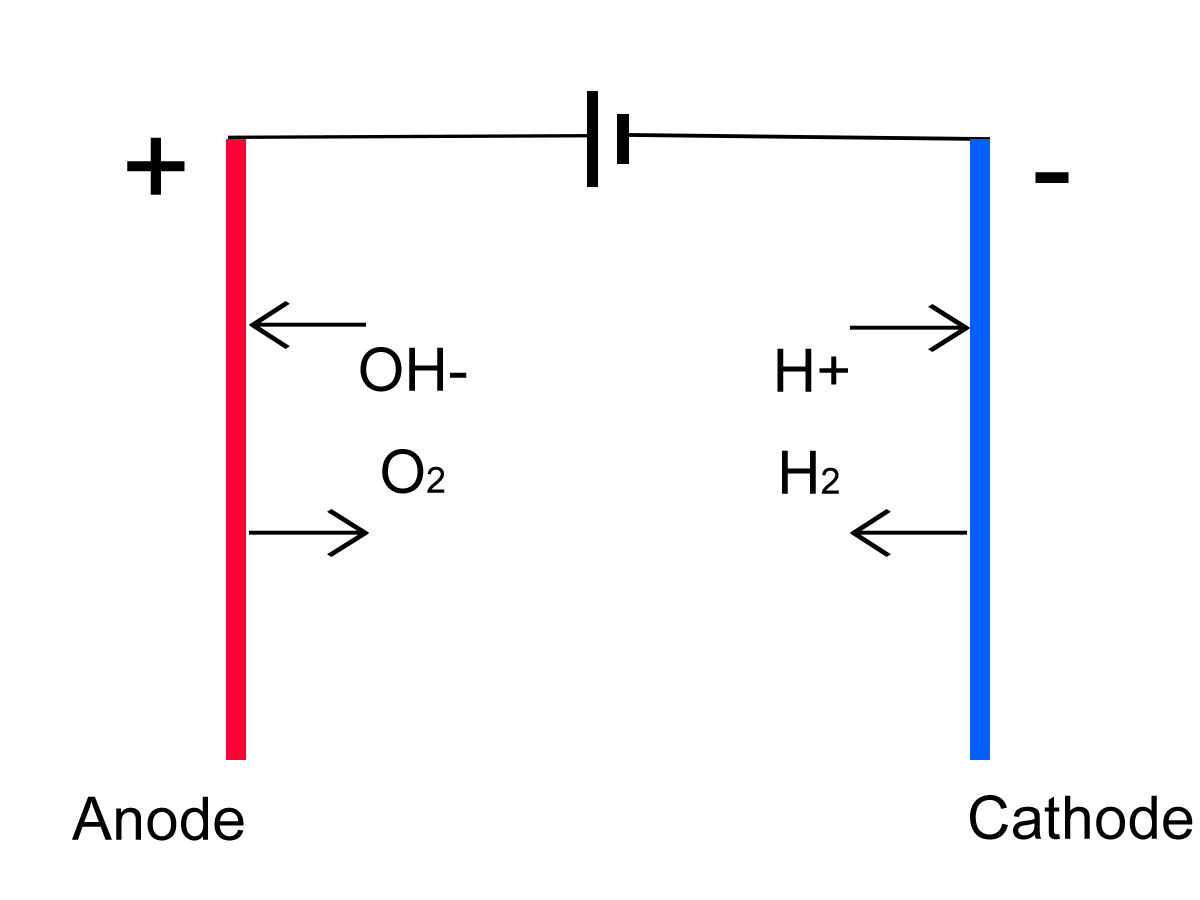
<style>
.page{position:relative;width:1200px;height:900px;background:#ffffff}
.page>*{position:absolute;margin:0}
.t1{font:120px "ArialMT";letter-spacing:0.002em;color:#020000}
.t2{font:60px "ArialMT";letter-spacing:0.002em;color:#020000}
.t3{font:36px "ArialMT";letter-spacing:0.002em;color:#020000}
</style>
<div class="page">
<p class="t1" style="left:127px;top:137px;width:58px;height:58px">+</p>
<p class="t1" style="left:1035px;top:172px;width:34px;height:11px">-</p>
<p class="t2" style="left:360px;top:347px;width:107px;height:45px">OH-</p>
<p class="t2" style="left:777px;top:348px;width:71px;height:44px">H+</p>
<p class="t2" style="left:382px;top:449px;width:63px;height:45px">O<span class="t3">2</span></p>
<p class="t2" style="left:782px;top:450px;width:57px;height:44px">H<span class="t3">2</span></p>
<p class="t2" style="left:72px;top:796px;width:172px;height:45px">Anode</p>
<p class="t2" style="left:970px;top:795px;width:223px;height:45px">Cathode</p>
</div>
